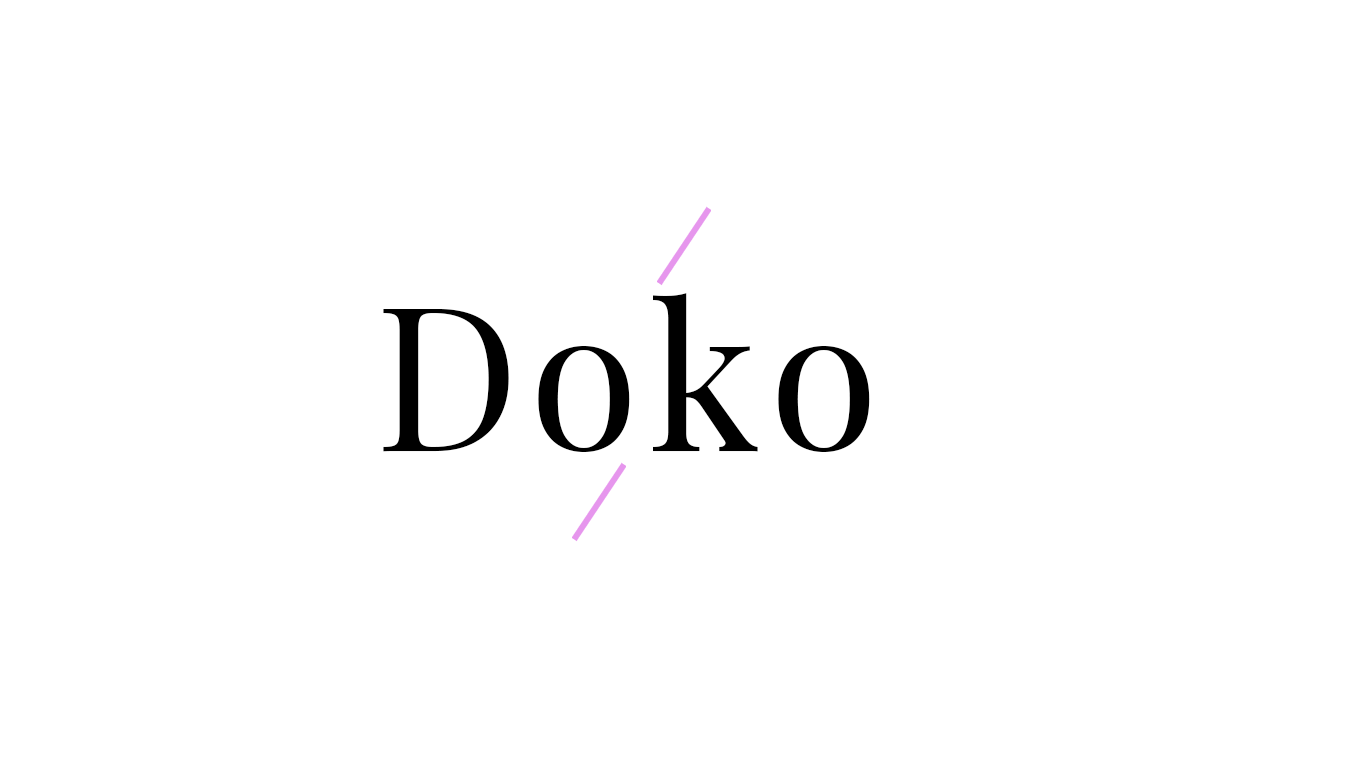
<style>
.page{position:relative;width:1366px;height:768px;background:#ffffff}
.page>*{position:absolute;margin:0}
.t1{font:200px "PlayfairDisplay-Regular";letter-spacing:0.05em;color:#000000;font-weight:bold}
</style>
<div class="page">
<p class="t1" style="left:383px;top:293px;width:487px;height:159px">Doko</p>
</div>
